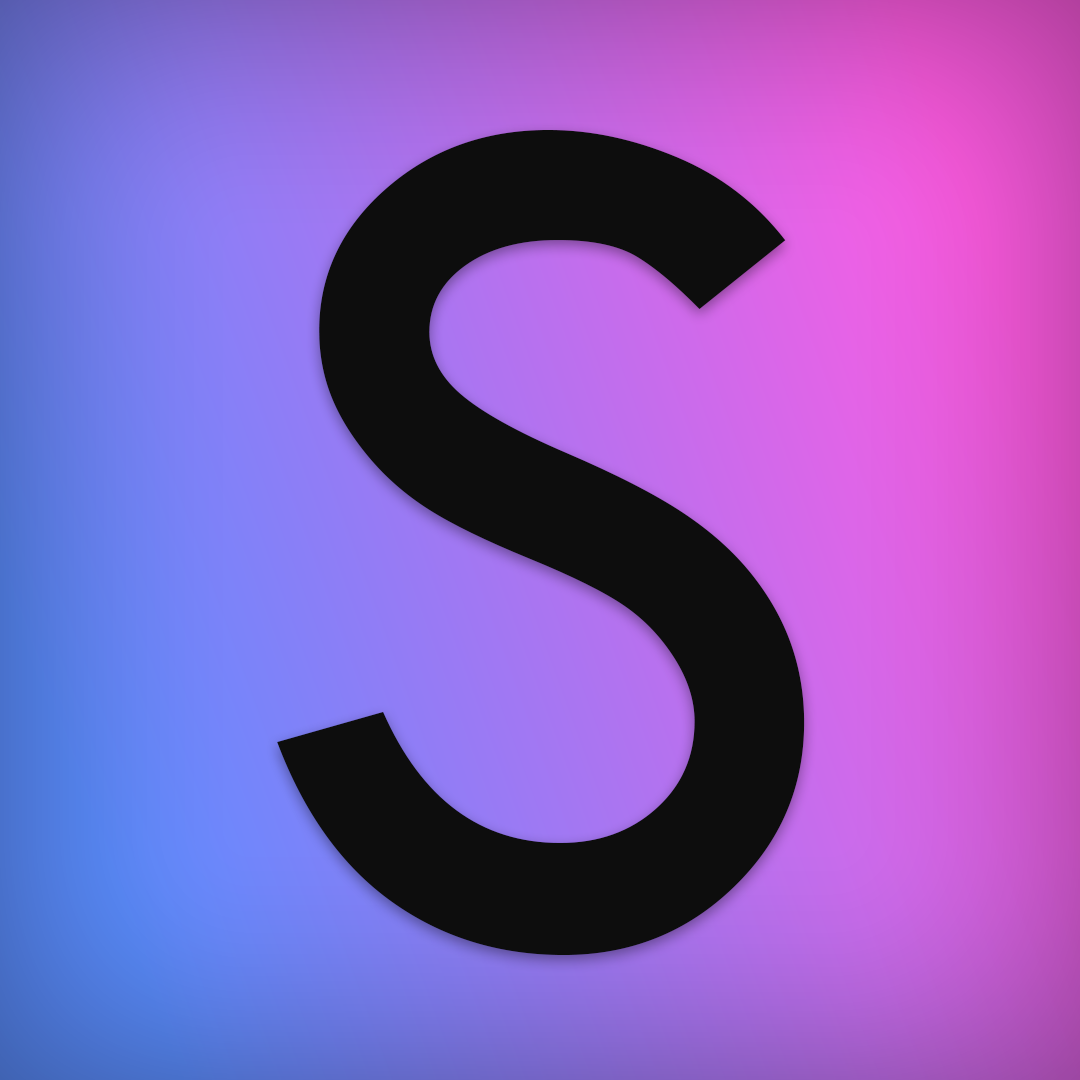
<style>
.page{position:relative;width:1080px;height:1080px}
.page>*{position:absolute;margin:0}
.t1{font:1246.3px "TwCenMT-Regular";color:#0d0d0d}
</style>
<div class="page">
<p class="t1" style="left:277px;top:130px;width:528px;height:825px">S</p>
</div>
